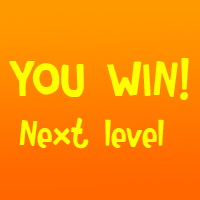
<style>
.page{position:relative;width:200px;height:200px}
.page>*{position:absolute;margin:0}
.t1{font:40px/50px "Rumpelstiltskin";letter-spacing:0.01em;color:#ffff00}
.t2{font:55px/50px "Rumpelstiltskin";letter-spacing:0.01em;color:#ffff00}
</style>
<div class="page">
<p class="t1" style="left:9px;top:58px;width:180px;height:91px;text-align:center"><span class="t2">YOU WIN!<br></span>Next level</p>
</div>
